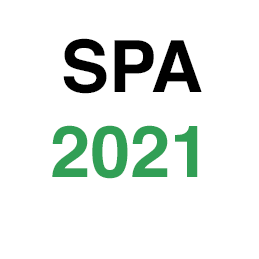
<style>
.page{position:relative;width:259px;height:259px;background:#ffffff}
.page>*{position:absolute;margin:0}
.t1{font:72px "Helvetica-Bold";color:#000000}
.t2{font:72px "Helvetica-Bold";color:#319f55}
</style>
<div class="page">
<p class="t1" style="left:63px;top:38px;width:139px;height:56px">SPA</p>
<p class="t2" style="left:52px;top:125px;width:146px;height:54px">2021</p>
</div>
